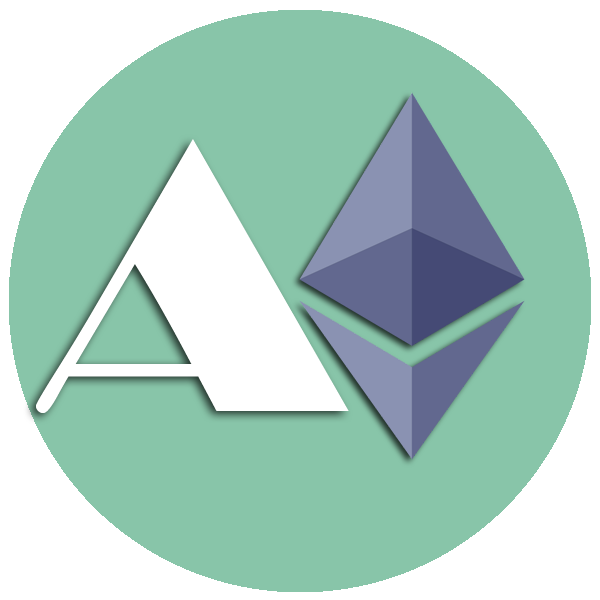
<style>
.page{position:relative;width:600px;height:600px;background:#88c5a9}
.page>*{position:absolute;margin:0}
.t1{font:360px "BroadwayBT-Regular";color:#ffffff}
</style>
<div class="page">
<p class="t1" style="left:36px;top:139px;width:313px;height:274px">A</p>
</div>
